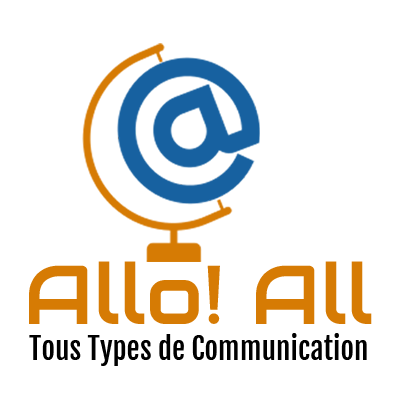
<style>
.page{position:relative;width:400px;height:400px;background:#ffffff}
.page>*{position:absolute;margin:0}
.t1{font:83.3px "Audiowide-Regular";color:#d67b04}
.t2{font:29.2px "FjallaOne-Regular";color:#000000}
</style>
<div class="page">
<p class="t1" style="left:29px;top:261px;width:343px;height:63px">Allo! All</p>
<p class="t2" style="left:29px;top:333px;width:338px;height:33px">Tous Types de Communication</p>
</div>
